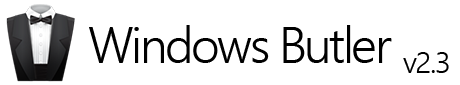
<style>
.page{position:relative;width:460px;height:85px;background:#ffffff}
.page>*{position:absolute;margin:0}
.t1{font:50px "SegoeUI-Semilight";letter-spacing:-0.05em;color:#000000}
.t2{font:30px "SegoeUI-Semilight";letter-spacing:-0.05em;color:#000000}
</style>
<div class="page">
<p class="t1" style="left:89px;top:25px;width:303px;height:38px">Windows Butler</p>
<p class="t2" style="left:403px;top:52px;width:46px;height:21px">v2.3</p>
</div>
